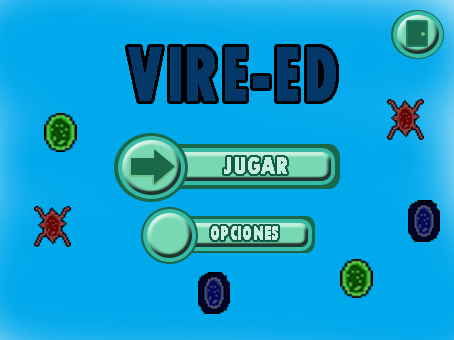
<style>
.page{position:relative;width:454px;height:340px;background:#00a8ec}
.page>*{position:absolute;margin:0}
.t1{font:24px "TwCenMT-CondensedExtraBold";color:#c7eddd;font-weight:bold}
.t2{font:20px "TwCenMT-CondensedExtraBold";color:#c7eddd;font-weight:bold;scale:0.79 1}
</style>
<div class="page">
<p class="t1" style="left:224px;top:157px;width:63px;height:17px">JUGAR</p>
<p class="t2" style="left:211px;top:226px;width:67px;height:14px">OPCIONES</p>
</div>
